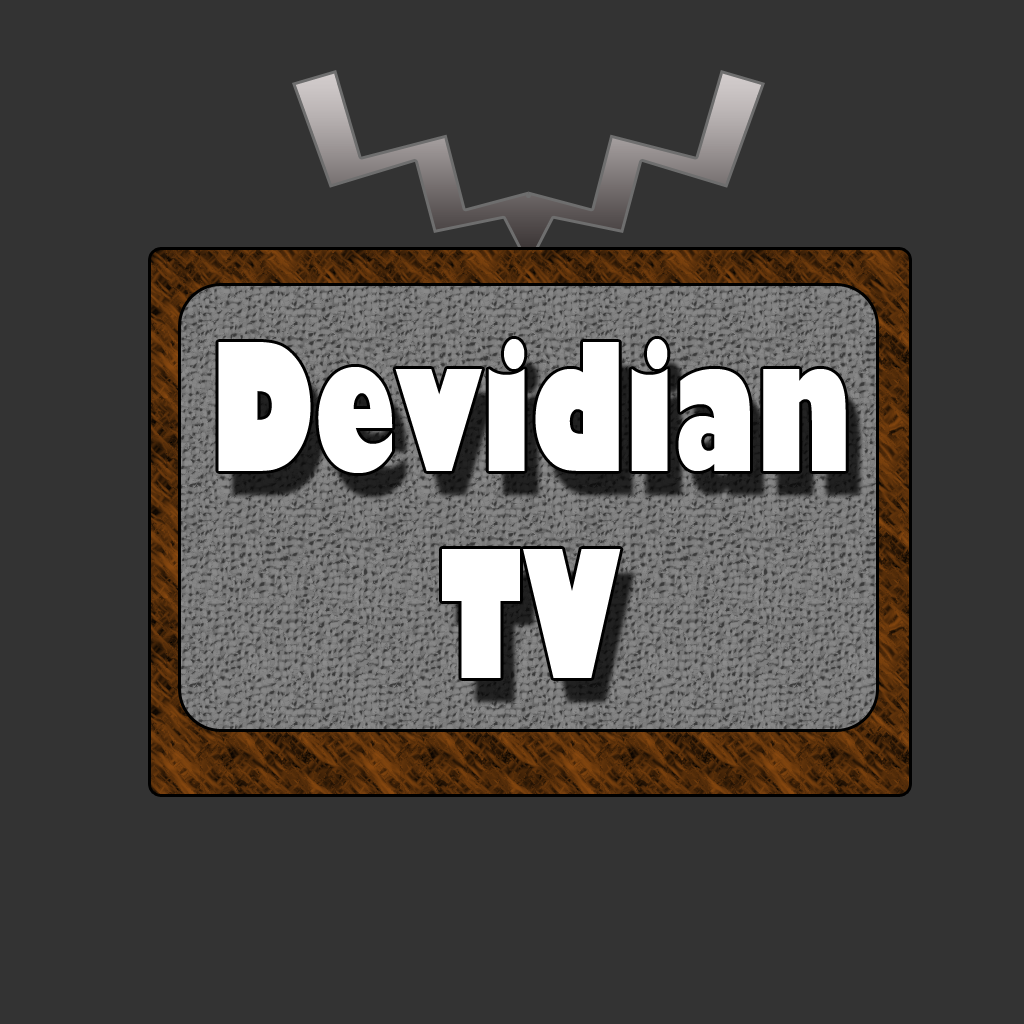
<style>
.page{position:relative;width:1024px;height:1024px;background:#333333}
.page>*{position:absolute;margin:0}
.t1{font:172.8px "GillSans-UltraBoldCondensed";color:#ffffff}
</style>
<div class="page">
<p class="t1" style="left:218px;top:339px;width:628px;height:339px;text-align:center">Devidian<br>TV</p>
</div>
